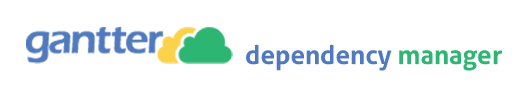
<style>
.page{position:relative;width:520px;height:100px;background:#ffffff}
.page>*{position:absolute;margin:0}
.t1{font:26px "Aller-Bold";color:#507abd}
.t2{font:26px "Aller-Bold";color:#2cb672}
</style>
<div class="page">
<p class="t1" style="left:246px;top:44px;width:256px;height:27px">dependency <span class="t2">manager</span></p>
</div>
